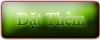
<style>
.page{position:relative;width:100px;height:40px}
.page>*{position:absolute;margin:0}
.t1{font:19.3px "TimesNewRomanPSMT";scale:0.88 1}
</style>
<div class="page">
<p class="t1" style="left:17px;top:12px;width:69px;height:16px">Đặt Thêm</p>
</div>
